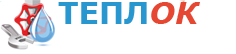
<style>
.page{position:relative;width:236px;height:54px;background:#ffffff}
.page>*{position:absolute;margin:0}
.t1{font:30px "Verdana-Bold";color:#2896cf}
.t2{font:30px "Verdana-BoldItalic";color:#e64732}
</style>
<div class="page">
<p class="t1" style="left:58px;top:2px;width:142px;height:22px">ТЕПЛ<span class="t2">ОК</span></p>
</div>
